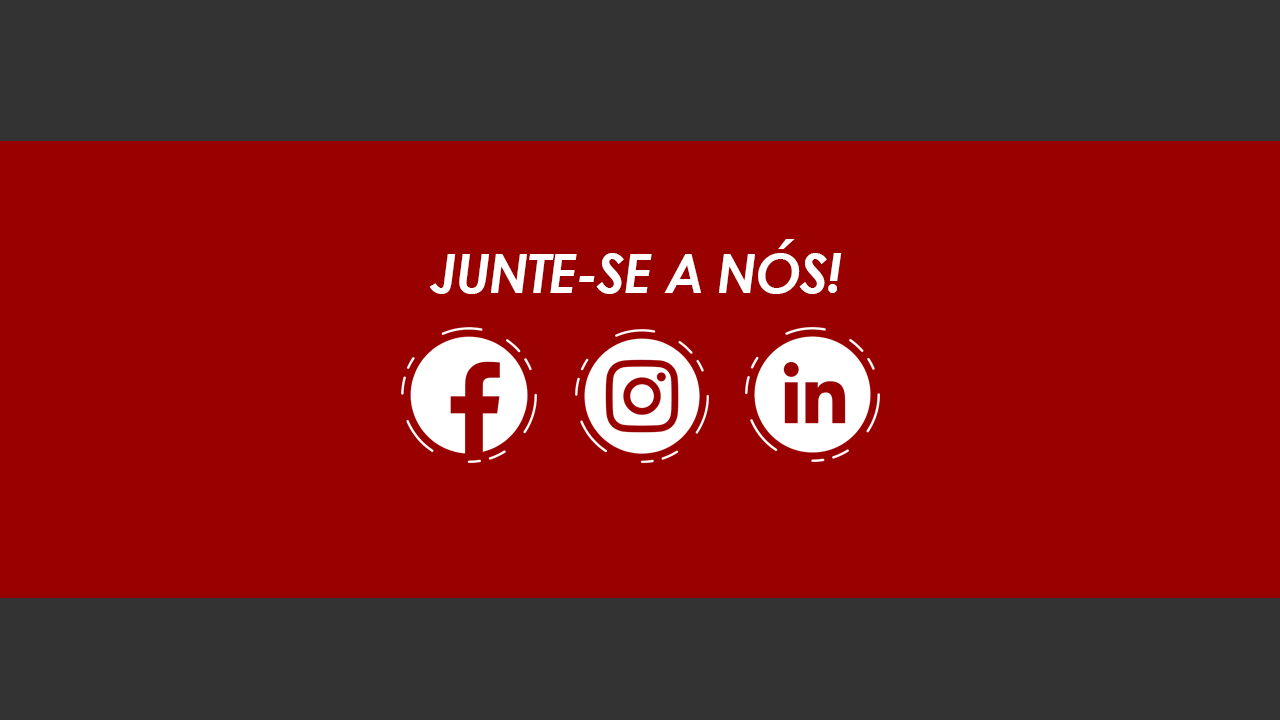
<style>
.page{position:relative;width:1280px;height:720px;background:#990000}
.page>*{position:absolute;margin:0}
.t1{font:54.2px "CenturyGothic-BoldItalic";letter-spacing:-0.025em;color:#ffffff}
</style>
<div class="page">
<p class="t1" style="left:429px;top:239px;width:413px;height:55px">JUNTE-SE A NÓS!</p>
</div>
